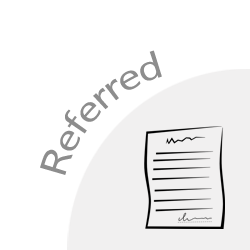
<style>
.page{position:relative;width:250px;height:250px;background:#ffffff}
.page>*{position:absolute;margin:0}
.t1{font:36px "LaoUI";color:#8d8d8d}
</style>
<div class="page">
<p class="t1" style="left:40px;top:50px;width:122px;height:125px;rotate:-45deg">Referred</p>
</div>
